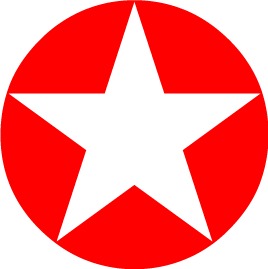
<style>
.page{position:relative;width:268px;height:269px;background:#ff0000}
.page>*{position:absolute;margin:0}
.t1{font:500px "DejaVuSansMono-Bold";color:#ff0000}
</style>
<div class="page">
<p class="t1" style="left:0px;top:0px;width:268px;height:269px">✪</p>
</div>
